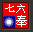
<style>
.page{position:relative;width:33px;height:32px;background:#f20000}
.page>*{position:absolute;margin:0}
.t1{font:10.4px "SimSun";color:#ffffff}
.t2{font:11.7px "SimSun";color:#ffffff}
</style>
<div class="page">
<p class="t1" style="left:5px;top:4px;width:20px;height:9px">七六</p>
<p class="t2" style="left:16px;top:15px;width:11px;height:12px">奉</p>
</div>
